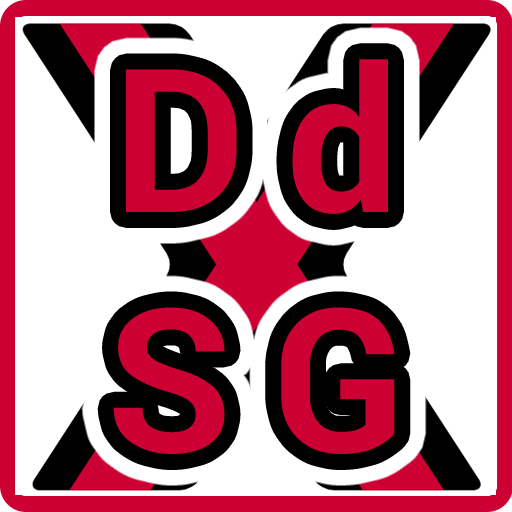
<style>
.page{position:relative;width:512px;height:512px;background:#ffffff}
.page>*{position:absolute;margin:0}
.t1{font:200px "Roboto-Bold";letter-spacing:0.2em;color:#cc0033}
</style>
<div class="page">
<p class="t1" style="left:113px;top:59px;width:282px;height:395px;text-align:center">Dd<br>SG</p>
</div>
